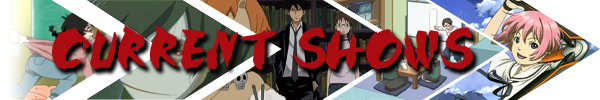
<style>
.page{position:relative;width:600px;height:100px}
.page>*{position:absolute;margin:0}
.t1{font:60px "SilkRoad";color:#ad0b12}
</style>
<div class="page">
<p class="t1" style="left:52px;top:25px;width:421px;height:44px">CURRENT SHOWS</p>
</div>
